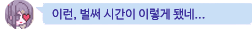
<style>
.page{position:relative;width:252px;height:29px;background:#c9dff6}
.page>*{position:absolute;margin:0}
.t1{font:12px "NanumBarunGothic";color:#3c2d9c}
</style>
<div class="page">
<p class="t1" style="left:52px;top:8px;width:153px;height:12px">이런, 벌써 시간이 이렇게 됐네...</p>
</div>
